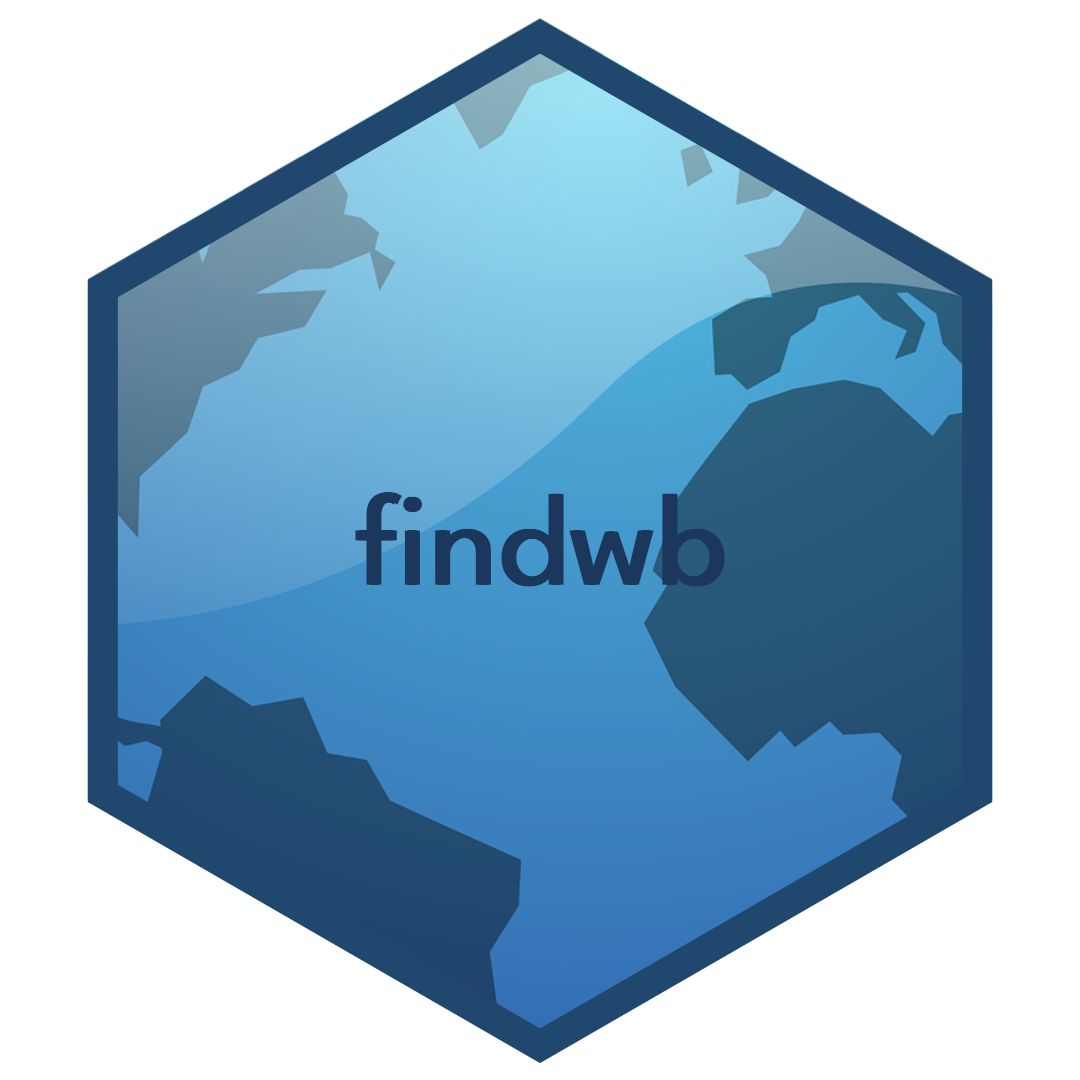
<style>
.page{position:relative;width:1080px;height:1080px;background:#ffffff}
.page>*{position:absolute;margin:0}
.t1{font:132px "LeagueSpartan-Regular";color:#1c375c;font-weight:bold}
</style>
<div class="page">
<p class="t1" style="left:355px;top:492px;width:370px;height:95px">findwb</p>
</div>
